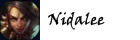
<style>
.page{position:relative;width:140px;height:40px;background:#ffffff}
.page>*{position:absolute;margin:0}
.t1{font:12px "VinerHandITC";color:#000000}
</style>
<div class="page">
<p class="t1" style="left:48px;top:12px;width:57px;height:18px">Nidalee</p>
</div>
